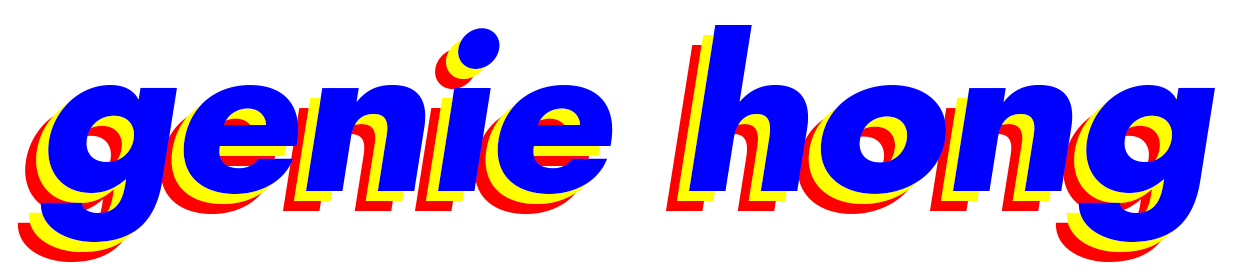
<style>
.page{position:relative;width:1233px;height:279px;background:#ffffff}
.page>*{position:absolute;margin:0}
.t1{font:200px "Futura-BoldOblique";color:#0000ff}
.t2{font:200px "Futura-BoldOblique"}
</style>
<div class="page">
<p class="t1" style="left:40px;top:25px;width:1175px;height:218px">genie hong</p>
<p class="t2" style="left:28px;top:35px;width:1175px;height:218px">genie hong</p>
<p class="t2" style="left:17px;top:45px;width:1175px;height:218px">genie hong</p>
</div>
